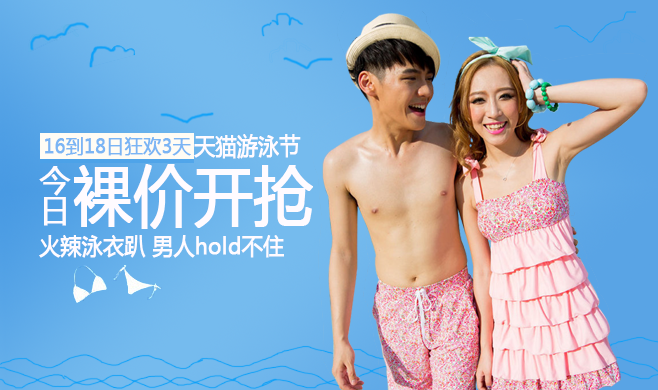
<style>
.page{position:relative;width:658px;height:390px}
.page>*{position:absolute;margin:0}
.t1{font:20px "MicrosoftYaHei";color:#7bb5f4;font-weight:bold;scale:0.9 1}
.t2{font:23px "MicrosoftYaHei";color:#fffbff;font-weight:bold;scale:0.9 1}
.t3{font:33px/30px "MicrosoftYaHei";color:#fffbff;font-weight:bold;scale:0.9 1}
.t4{font:65px "MicrosoftYaHei";color:#fffbff;font-weight:bold;scale:0.9 1}
</style>
<div class="page">
<p class="t1" style="left:45px;top:137px;width:146px;height:19px">16到18日狂欢3天</p>
<p class="t2" style="left:194px;top:134px;width:107px;height:25px">天猫游泳节</p>
<p class="t3" style="left:39px;top:166px;width:32px;height:60px;text-align:center">今<br>日</p>
<p class="t4" style="left:73px;top:164px;width:240px;height:65px">裸价开抢</p>
<p class="t2" style="left:39px;top:235px;width:245px;height:23px">火辣泳衣趴 男人hold不住</p>
</div>
